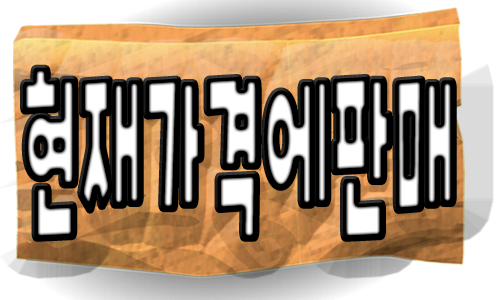
<style>
.page{position:relative;width:500px;height:300px}
.page>*{position:absolute;margin:0}
.t1{font:170.2px "CookieRunOTF-Black";scale:0.38 1}
</style>
<div class="page">
<p class="t1" style="left:23px;top:67px;width:431px;height:172px">현재가격에판매</p>
</div>
